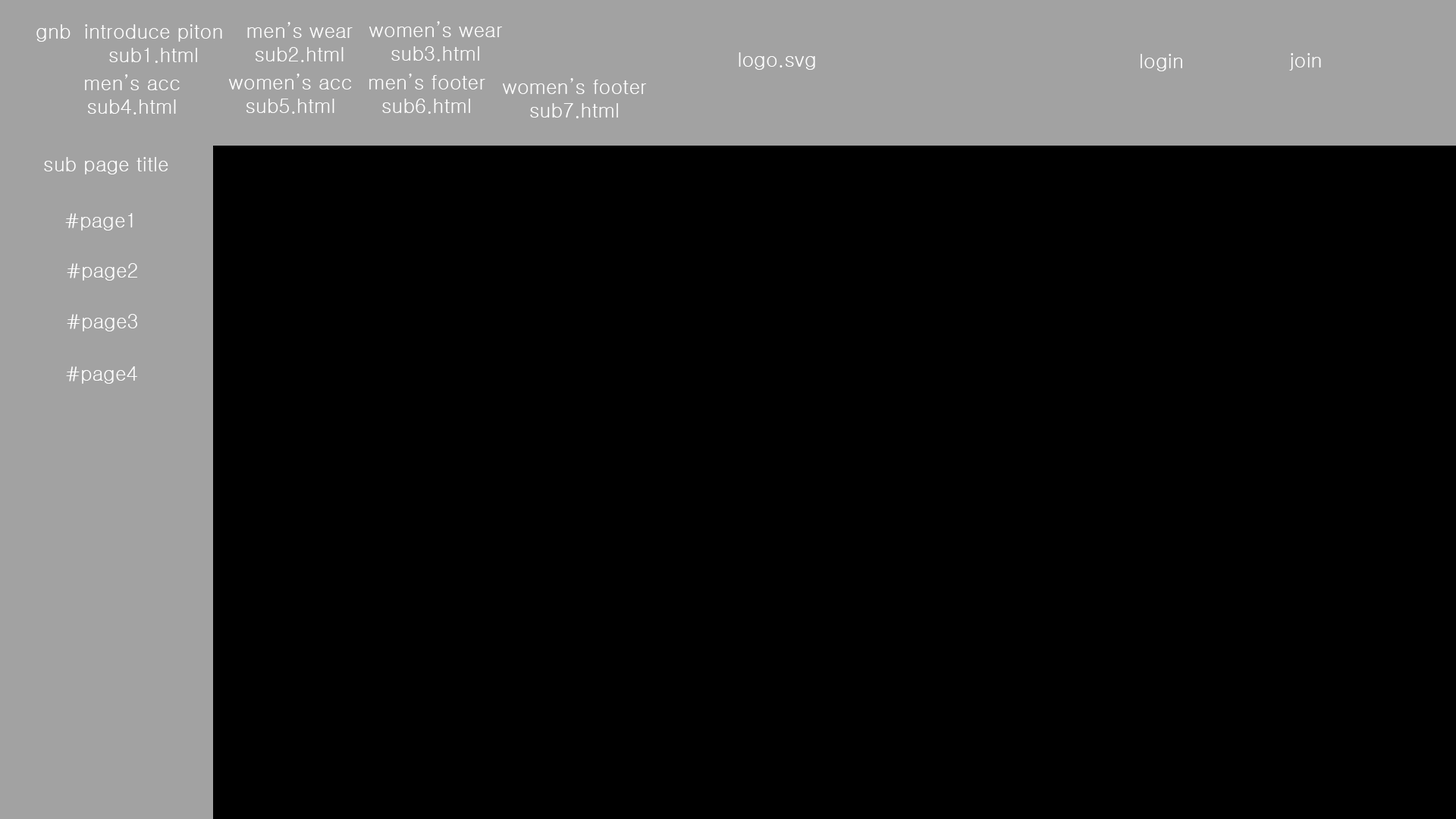
<style>
.page{position:relative;width:1456px;height:819px;background:#000000}
.page>*{position:absolute;margin:0}
.t1{font:19.7px "Gulim";color:#ffffff}
</style>
<div class="page">
<p class="t1" style="left:36px;top:24px;width:35px;height:18px">gnb</p>
<p class="t1" style="left:85px;top:24px;width:137px;height:39px;text-align:center">introduce piton<br>sub1.html</p>
<p class="t1" style="left:247px;top:22px;width:106px;height:40px;text-align:center">men’s wear<br>sub2.html</p>
<p class="t1" style="left:369px;top:21px;width:133px;height:40px;text-align:center">women’s wear<br>sub3.html</p>
<p class="t1" style="left:739px;top:52px;width:76px;height:18px">logo.svg</p>
<p class="t1" style="left:1141px;top:54px;width:41px;height:17px">login</p>
<p class="t1" style="left:1289px;top:53px;width:32px;height:18px">join</p>
<p class="t1" style="left:85px;top:74px;width:95px;height:41px;text-align:center">men’s acc<br>sub4.html</p>
<p class="t1" style="left:229px;top:74px;width:123px;height:40px;text-align:center">women’s acc<br>sub5.html</p>
<p class="t1" style="left:369px;top:74px;width:116px;height:40px;text-align:center">men’s footer<br>sub6.html</p>
<p class="t1" style="left:503px;top:78px;width:143px;height:40px;text-align:center">women’s footer<br>sub7.html</p>
<p class="t1" style="left:44px;top:157px;width:124px;height:17px">sub page title</p>
<p class="t1" style="left:65px;top:213px;width:68px;height:18px">#page1</p>
<p class="t1" style="left:67px;top:263px;width:70px;height:18px">#page2</p>
<p class="t1" style="left:67px;top:314px;width:70px;height:17px">#page3</p>
<p class="t1" style="left:66px;top:366px;width:71px;height:18px">#page4</p>
</div>
